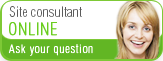
<style>
.page{position:relative;width:163px;height:61px;background:#ffffff}
.page>*{position:absolute;margin:0}
.t1{font:14px "HeliosCondThin";letter-spacing:0.04em;color:#5b5b5b}
.t2{font:17px "HeliosCondThin";letter-spacing:0.04em;color:#6acd1f;text-transform:uppercase;font-weight:bold}
.t3{font:12px "HeliosCondThin";letter-spacing:0.06em;color:#ffffff;font-weight:bold}
</style>
<div class="page">
<p class="t1" style="left:9px;top:6px;width:73px;height:11px">Site consultant</p>
<p class="t2" style="left:9px;top:22px;width:48px;height:14px">ONLINE</p>
<p class="t3" style="left:8px;top:44px;width:85px;height:12px">Ask your question</p>
</div>
